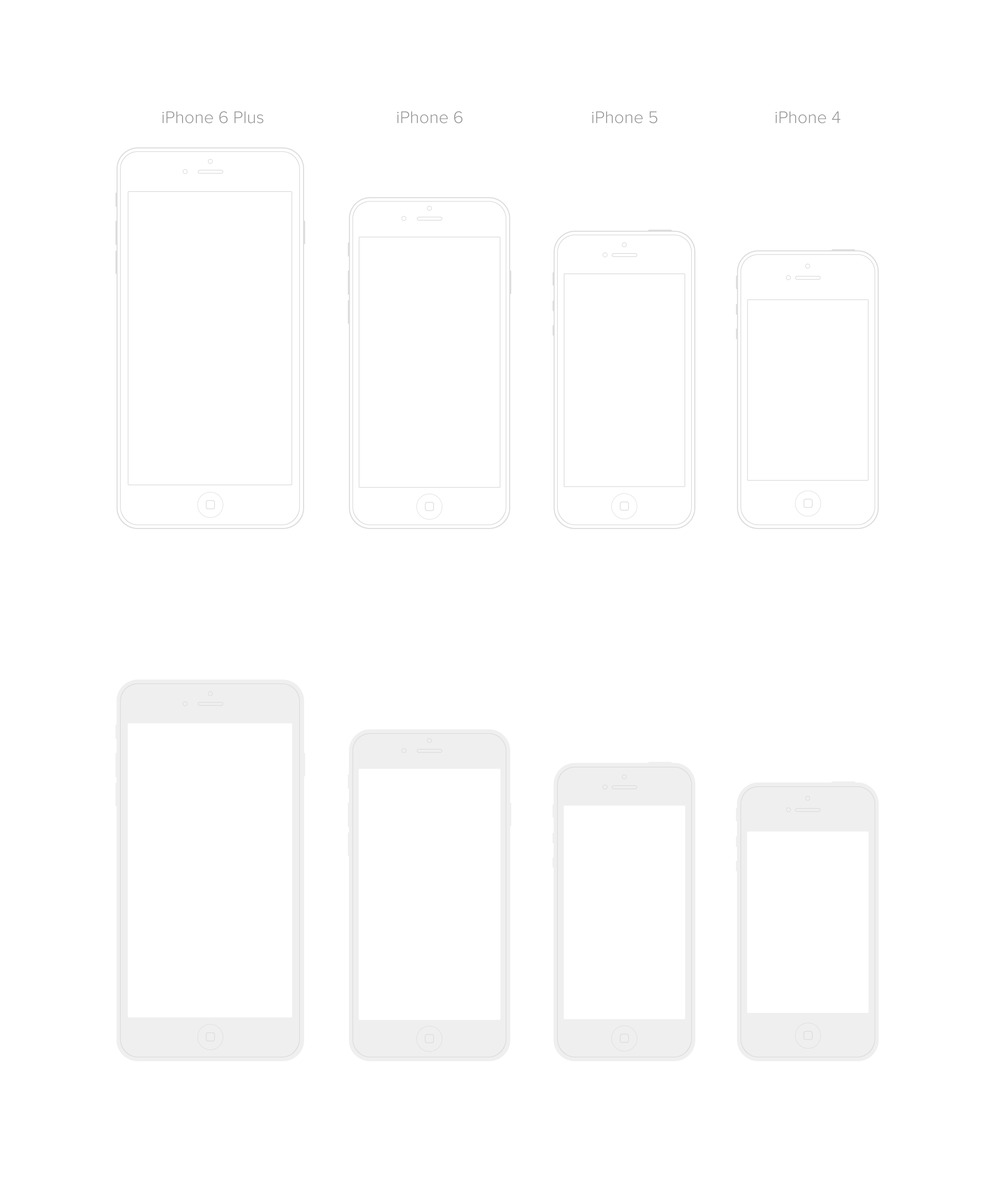
<style>
.page{position:relative;width:997px;height:1196px;background:#ffffff}
.page>*{position:absolute;margin:0}
.t1{font:17.5px "ProximaNova-Light";color:#999999}
</style>
<div class="page">
<p class="t1" style="left:162px;top:111px;width:102px;height:12px">iPhone 6 Plus</p>
<p class="t1" style="left:397px;top:111px;width:66px;height:12px">iPhone 6</p>
<p class="t1" style="left:592px;top:111px;width:66px;height:12px">iPhone 5</p>
<p class="t1" style="left:776px;top:111px;width:65px;height:12px">iPhone 4</p>
</div>
